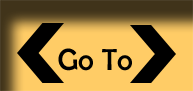
<style>
.page{position:relative;width:193px;height:91px;background:#ffcc66}
.page>*{position:absolute;margin:0}
.t1{font:30.5px "BerlinSansFB-Reg";color:#000000}
</style>
<div class="page">
<p class="t1" style="left:58px;top:48px;width:74px;height:23px">Go To</p>
</div>
